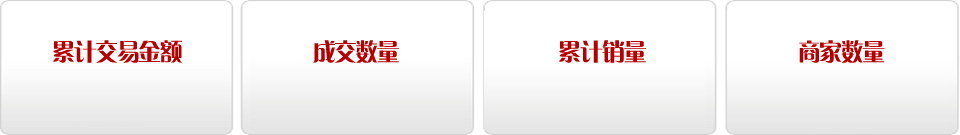
<style>
.page{position:relative;width:960px;height:135px;background:#ffffff}
.page>*{position:absolute;margin:0}
.t1{font:24px "FZCQJW--GB1-0";color:#b40000;scale:0.97 1}
</style>
<div class="page">
<p class="t1" style="left:52px;top:40px;width:130px;height:23px">累计交易金额</p>
<p class="t1" style="left:313px;top:40px;width:86px;height:23px">成交数量</p>
<p class="t1" style="left:558px;top:40px;width:88px;height:23px">累计销量</p>
<p class="t1" style="left:799px;top:40px;width:86px;height:23px">商家数量</p>
</div>
